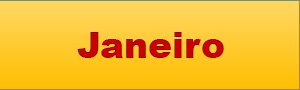
<style>
.page{position:relative;width:300px;height:90px}
.page>*{position:absolute;margin:0}
.t1{font:36px "Arial-Black";color:#cc0000}
</style>
<div class="page">
<p class="t1" style="left:77px;top:32px;width:147px;height:26px">Janeiro</p>
</div>
